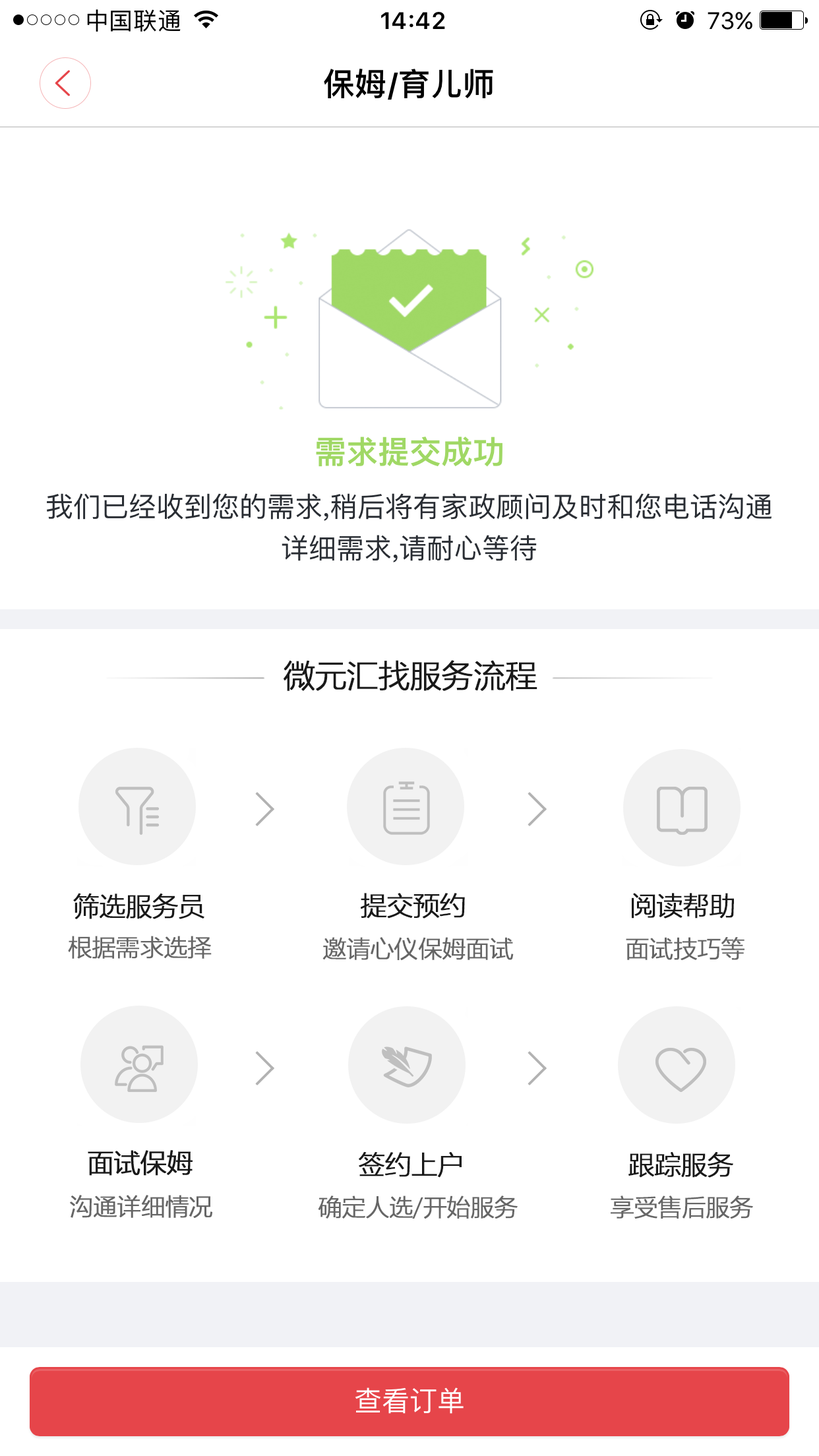
<style>
.page{position:relative;width:819px;height:1456px;background:#ffffff}
.page>*{position:absolute;margin:0}
.t1{font:31.7px "MicrosoftYaHeiLight";letter-spacing:-0.025em;color:#191919;font-weight:bold}
.t2{font:26.4px "MicrosoftYaHeiLight";letter-spacing:-0.025em;color:#191919;font-weight:bold}
.t3{font:23.7px "MicrosoftYaHeiLight";letter-spacing:-0.025em;color:#666666;font-weight:bold}
</style>
<div class="page">
<p class="t1" style="left:284px;top:660px;width:253px;height:31px">微元汇找服务流程</p>
<p class="t2" style="left:73px;top:893px;width:131px;height:26px">筛选服务员</p>
<p class="t2" style="left:361px;top:893px;width:104px;height:26px">提交预约</p>
<p class="t2" style="left:632px;top:893px;width:102px;height:26px">阅读帮助</p>
<p class="t3" style="left:68px;top:936px;width:144px;height:23px">根据需求选择</p>
<p class="t3" style="left:322px;top:937px;width:192px;height:23px">邀请心仪保姆面试</p>
<p class="t3" style="left:626px;top:937px;width:118px;height:23px">面试技巧等</p>
<p class="t2" style="left:359px;top:1152px;width:103px;height:26px">签约上户</p>
<p class="t2" style="left:628px;top:1152px;width:105px;height:26px">跟踪服务</p>
<p class="t3" style="left:318px;top:1196px;width:200px;height:23px">确定人选/开始服务</p>
<p class="t3" style="left:611px;top:1196px;width:142px;height:23px">享受售后服务</p>
</div>
